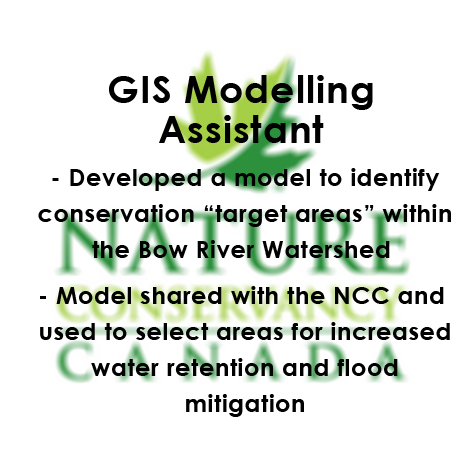
<style>
.page{position:relative;width:474px;height:474px;background:#ffffff}
.page>*{position:absolute;margin:0}
.t1{font:38px/40px "CenturyGothic-Bold";letter-spacing:0.025em;color:#000000}
.t2{font:24px/36px "CenturyGothic-Bold";letter-spacing:0.025em;color:#000000}
.t3{font:24px/36px "CenturyGothic";letter-spacing:0.025em;color:#000000}
</style>
<div class="page">
<p class="t1" style="left:109px;top:75px;width:264px;height:68px;text-align:center">GIS Modelling<br>Assistant</p>
<p class="t2" style="left:38px;top:168px;width:413px;height:249px;text-align:center"><span class="t3"> </span>- Developed a model to identify <br>conservation “target areas” within<br>the Bow River Watershed <br>                     <br>- Model shared with the NCC and <br>used to select areas for increased<br>water retention and flood<br>mitigation</p>
</div>
